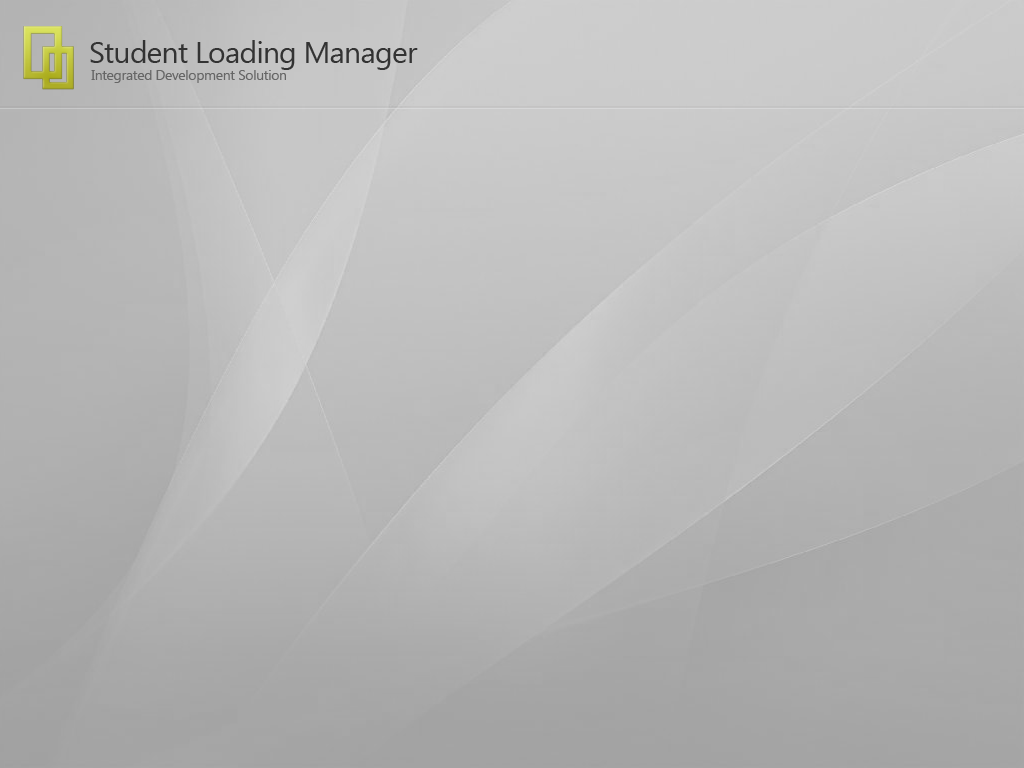
<style>
.page{position:relative;width:1024px;height:768px}
.page>*{position:absolute;margin:0}
.t1{font:30px "SegoeUI";letter-spacing:-0.025em;color:#333333}
.t2{font:14px "SegoeUI";letter-spacing:-0.025em;color:#666666}
</style>
<div class="page">
<p class="t1" style="left:90px;top:40px;width:328px;height:30px">Student Loading Manager</p>
<p class="t2" style="left:91px;top:70px;width:195px;height:13px">Integrated Development Solution</p>
</div>
